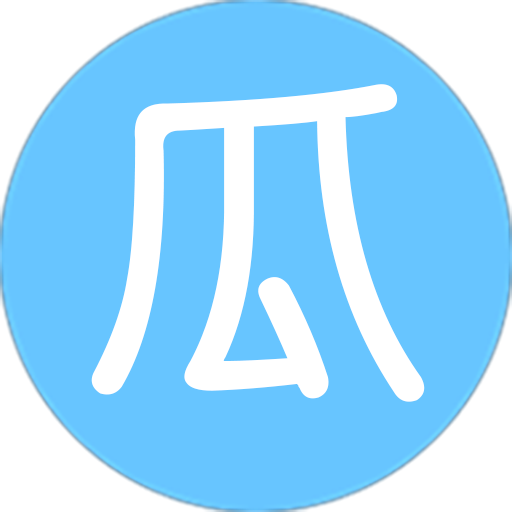
<style>
.page{position:relative;width:512px;height:512px;background:#67c5ff}
.page>*{position:absolute;margin:0}
.t1{font:344.6px "FZY3K--GBK1-0";color:#ffffff}
</style>
<div class="page">
<p class="t1" style="left:91px;top:84px;width:334px;height:318px">瓜</p>
</div>
